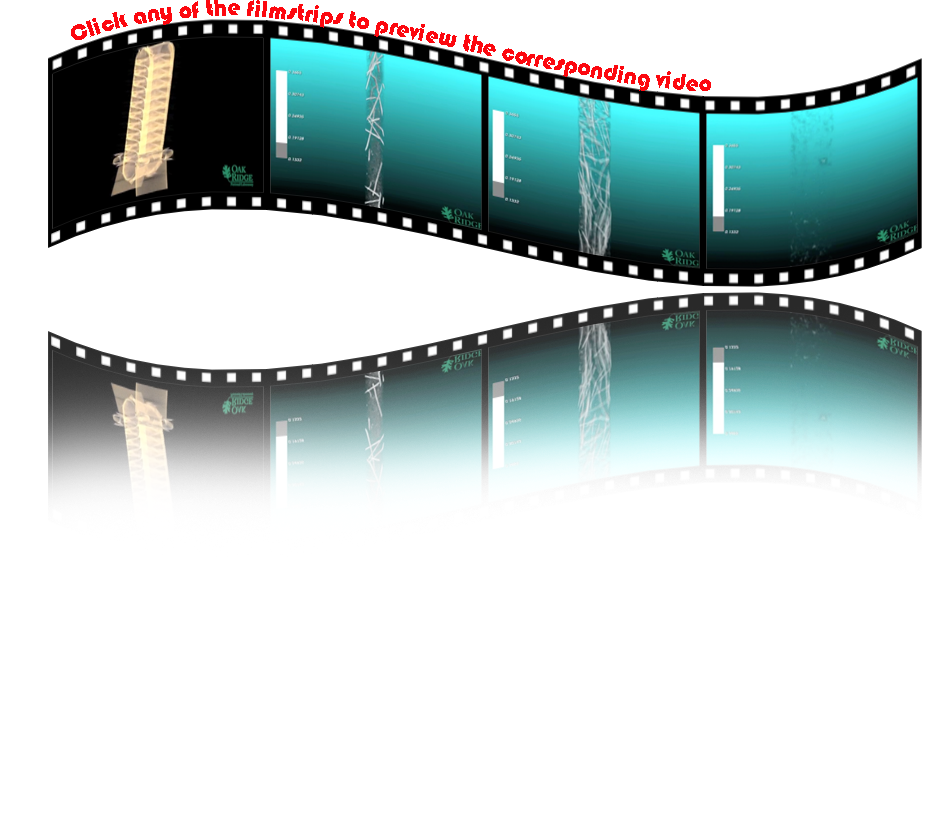
<style>
.page{position:relative;width:950px;height:820px;background:#ffffff}
.page>*{position:absolute;margin:0}
.t1{font:24.3px/23.3px "Bauhaus93";color:#fc080f}
</style>
<div class="page">
<p class="t1" style="left:71px;top:0px;width:640px;height:91px">Click any of the filmstrips to preview the corresponding video</p>
</div>
